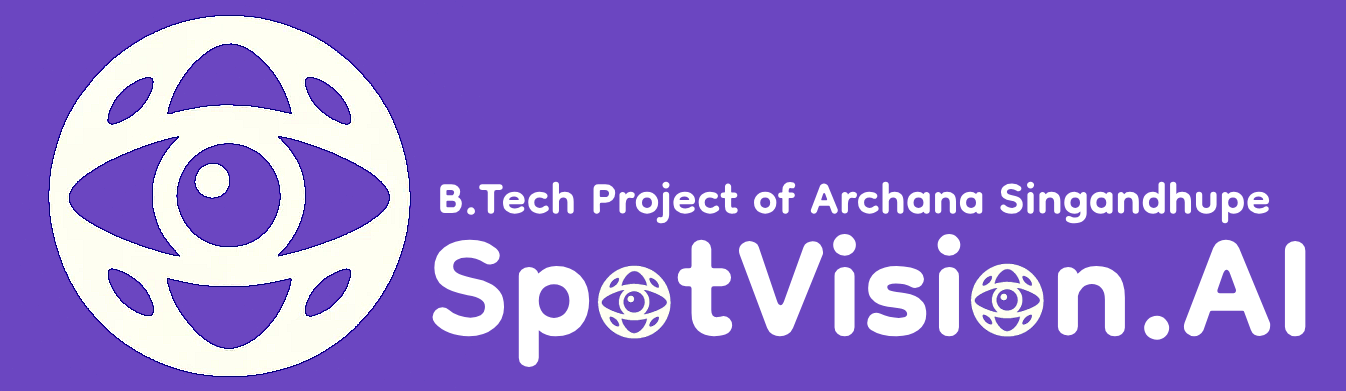
<style>
.page{position:relative;width:1346px;height:391px;background:#6b46c1}
.page>*{position:absolute;margin:0}
.t1{font:71px "Dongle-Bold";color:#ffffff}
.t2{font:227px "Dongle-Bold";color:#ffffff}
</style>
<div class="page">
<p class="t1" style="left:440px;top:181px;width:830px;height:43px">B.Tech Project of Archana Singandhupe</p>
<p class="t2" style="left:432px;top:234px;width:874px;height:133px">SpotVision.AI</p>
</div>
